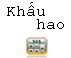
<style>
.page{position:relative;width:71px;height:58px;background:#ffffff}
.page>*{position:absolute;margin:0}
.t1{font:12px/13.3px "CourierNewPSMT";color:#000000}
</style>
<div class="page">
<p class="t1" style="left:7px;top:2px;width:57px;height:27px">Khấu<br>   hao</p>
</div>
